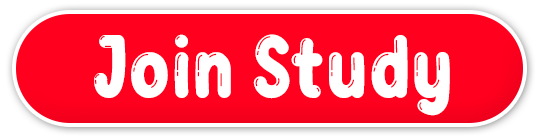
<style>
.page{position:relative;width:538px;height:139px;background:#ff001e}
.page>*{position:absolute;margin:0}
.t1{font:90.3px "BubbleBobble";color:#ffffff}
</style>
<div class="page">
<p class="t1" style="left:94px;top:34px;width:356px;height:82px">Join Study</p>
</div>
